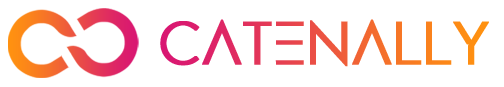
<style>
.page{position:relative;width:504px;height:87px;background:#ffffff}
.page>*{position:absolute;margin:0}
.t1{font:58.3px "Pasajero";letter-spacing:0.025em;font-weight:bold}
</style>
<div class="page">
<p class="t1" style="left:160px;top:19px;width:329px;height:48px">CAtEnALLY</p>
</div>
